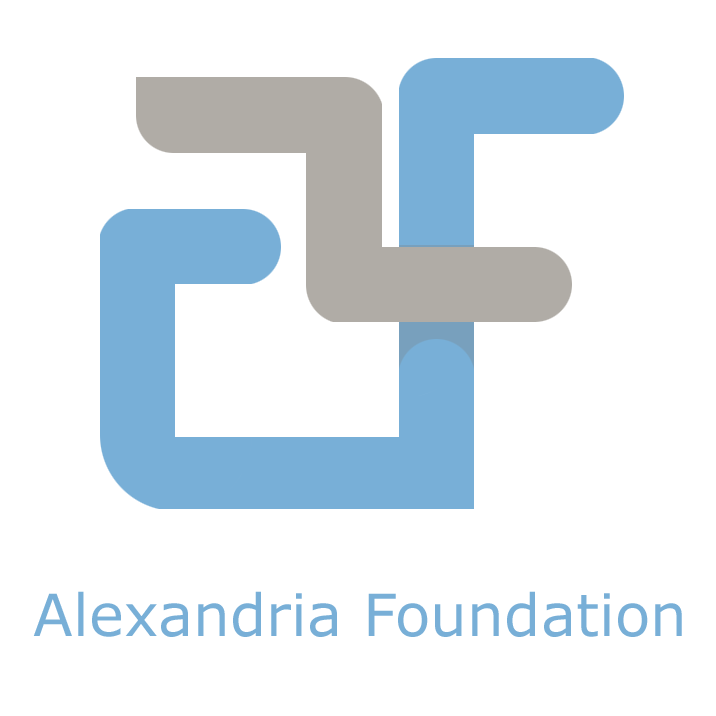
<style>
.page{position:relative;width:716px;height:716px;background:#ffffff}
.page>*{position:absolute;margin:0}
.t1{font:58.3px "Verdana";color:#78afd7}
</style>
<div class="page">
<p class="t1" style="left:33px;top:591px;width:649px;height:46px">Alexandria Foundation</p>
</div>
